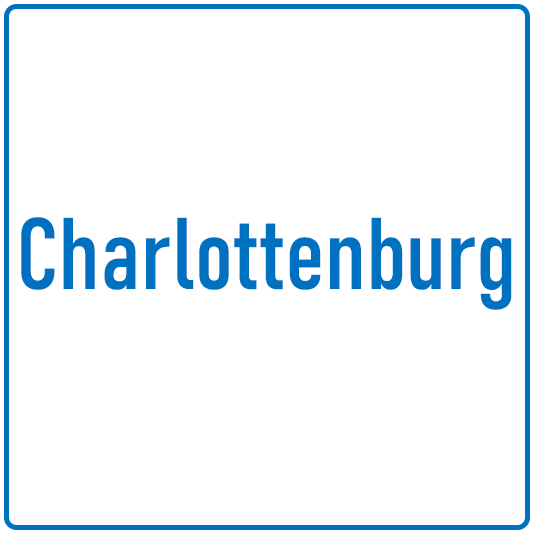
<style>
.page{position:relative;width:533px;height:533px;background:#ffffff}
.page>*{position:absolute;margin:0}
.t1{font:100px "Bahnschrift-Condensed";color:#0070c0}
</style>
<div class="page">
<p class="t1" style="left:21px;top:217px;width:491px;height:93px">Charlottenburg</p>
</div>
